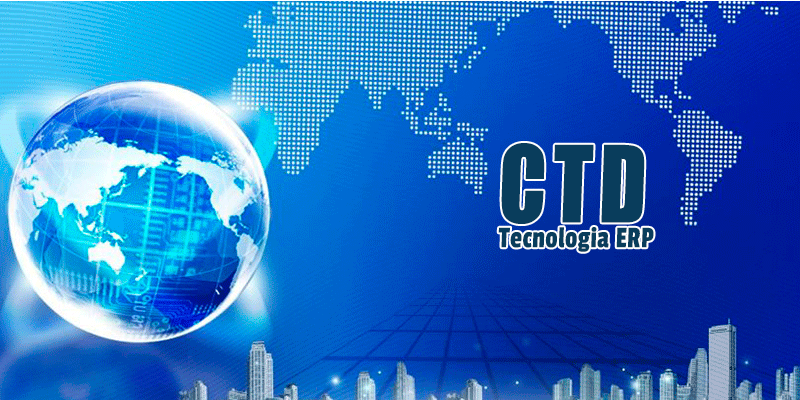
<style>
.page{position:relative;width:800px;height:400px}
.page>*{position:absolute;margin:0}
.t1{font:31.5px/25.3px "PassionOne-Regular";letter-spacing:0.02em;color:#093d5c;font-style:italic;scale:0.85 1}
.t2{font:98.2px/25.3px "Impact";letter-spacing:0.06em;color:#093d5c;font-weight:bold;font-style:italic;scale:0.85 1}
</style>
<div class="page">
<p class="t1" style="left:498px;top:143px;width:156px;height:109px;text-align:center"><span class="t2">CTD<br></span>Tecnologia ERP</p>
</div>
